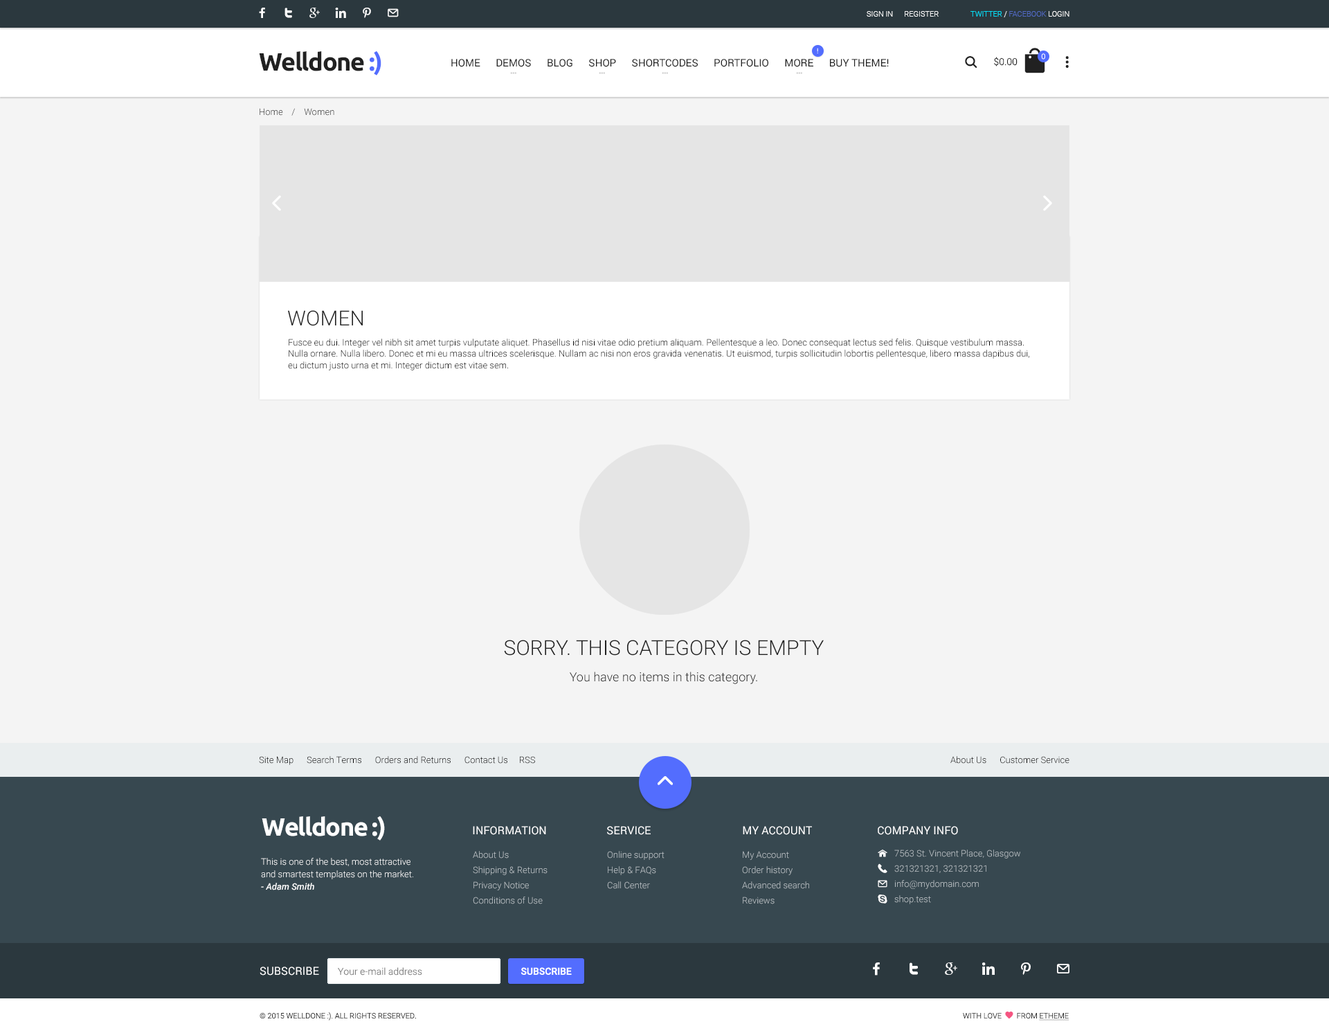
<style>
.page{position:relative;width:1329px;height:1033px;background:#f4f4f4}
.page>*{position:absolute;margin:0}
.t1{font:7.6px "Roboto-Light";color:#ffffff}
.t2{font:7.6px "Roboto-Light";color:#526ac4}
.t3{font:7.6px "Roboto-Light";color:#00e4ff}
.t4{font:24.9px "Ubuntu-Bold";letter-spacing:-0.04em;color:#212121}
.t5{font:24.9px "Ubuntu-Bold";letter-spacing:-0.04em;color:#536dfe}
.t6{font:6.9px "Roboto-Regular"}
.t7{font:10.4px "Roboto-Regular";color:#212121}
.t8{font:9.7px "Roboto-Light";color:#212121}
.t9{font:9px "Roboto-Light";color:#2b2b2b}
.t10{font:20.8px "Roboto-Light";color:#212121;text-transform:uppercase}
.t11{font:9px/11.4px "Roboto-Light";color:#000000}
.t12{font:12.5px/26.3px "Roboto-Light";color:#212121}
.t13{font:20.8px/26.3px "Roboto-Light";color:#212121;text-transform:uppercase}
.t14{font:9px "Roboto-Light";color:#000000}
.t15{font:24.9px "Ubuntu-Bold";letter-spacing:-0.04em;color:#ffffff}
.t16{font:11.1px "Roboto-Regular";color:#ffffff;text-transform:uppercase}
.t17{font:9px/12.5px "Roboto-Light";color:#ffffff}
.t18{font:9px/12.5px "Roboto-MediumItalic";color:#ffffff}
.t19{font:9px/15.2px "Roboto-Light";color:#bbc2c6}
.t20{font:9.7px "Roboto-Light";color:#848484}
.t21{font:9.7px "Roboto-Medium";color:#ffffff;text-transform:uppercase}
.t22{font:7.6px "Roboto-Light";color:#2b2b2b;text-transform:uppercase}
</style>
<div class="page">
<p class="t1" style="left:867px;top:11px;width:72px;height:6px">SIGN IN      REGISTER</p>
<p class="t2" style="left:971px;top:11px;width:99px;height:6px"><span class="t3">TWITTER </span><span class="t1">/ </span>FACEBOOK <span class="t1">LOGIN</span></p>
<p class="t4" style="left:259px;top:51px;width:122px;height:24px">Welldone <span class="t5">:)</span></p>
<p class="t6" style="left:817px;top:48px;width:1px;height:5px">!</p>
<p class="t1" style="left:1041px;top:53px;width:4px;height:7px">0</p>
<p class="t7" style="left:451px;top:59px;width:438px;height:8px">HOME      DEMOS      BLOG      SHOP      SHORTCODES      PORTFOLIO      MORE      BUY THEME!</p>
<p class="t8" style="left:994px;top:57px;width:24px;height:9px">$0.00</p>
<p class="t9" style="left:260px;top:108px;width:74px;height:8px">Home    /    Women</p>
<p class="t10" style="left:288px;top:310px;width:75px;height:16px">Women</p>
<p class="t11" style="left:288px;top:339px;width:741px;height:31px">Fusce eu dui. Integer vel nibh sit amet turpis vulputate aliquet. Phasellus id nisi vitae odio pretium aliquam. Pellentesque a leo. Donec consequat lectus sed felis. Quisque vestibulum massa. Nulla ornare. Nulla libero. Donec et mi eu massa ultrices scelerisque. Nullam ac nisi non eros gravida venenatis. Ut euismod, turpis sollicitudin lobortis pellentesque, libero massa dapibus dui, eu dictum justo urna et mi. Integer dictum est vitae sem.</p>
<p class="t12" style="left:504px;top:640px;width:320px;height:44px;text-align:center"><span class="t13">Sorry. This Category is Empty<br></span>You have no items in this category.</p>
<p class="t14" style="left:259px;top:756px;width:276px;height:9px">Site Map      Search Terms      Orders and Returns      Contact Us     RSS</p>
<p class="t14" style="left:951px;top:756px;width:119px;height:8px">About Us      Customer Service</p>
<p class="t15" style="left:262px;top:816px;width:123px;height:24px">Welldone :)</p>
<p class="t16" style="left:473px;top:826px;width:73px;height:9px">Information</p>
<p class="t16" style="left:607px;top:826px;width:44px;height:9px">service</p>
<p class="t16" style="left:743px;top:826px;width:69px;height:9px">My account</p>
<p class="t16" style="left:878px;top:826px;width:80px;height:9px">Company Info</p>
<p class="t17" style="left:261px;top:858px;width:152px;height:32px">This is one of the best, most attractive and smartest templates on the market. <br><span class="t18">- Adam Smith</span></p>
<p class="t19" style="left:473px;top:851px;width:75px;height:53px">About Us<br>Shipping &amp; Returns<br>Privacy Notice<br>Conditions of Use</p>
<p class="t19" style="left:607px;top:851px;width:58px;height:38px">Online support<br>Help &amp; FAQs<br>Call Center</p>
<p class="t19" style="left:742px;top:851px;width:67px;height:53px">My Account<br>Order history<br>Advanced search<br>Reviews</p>
<p class="t19" style="left:894px;top:849px;width:126px;height:55px">7563 St. Vincent Place, Glasgow<br>321321321, 321321321<br>info@mydomain.com<br>shop.test</p>
<p class="t16" style="left:260px;top:966px;width:59px;height:9px">Subscribe</p>
<p class="t20" style="left:338px;top:967px;width:84px;height:8px">Your e-mail address</p>
<p class="t21" style="left:521px;top:967px;width:51px;height:8px">SUBSCRIBE</p>
<p class="t22" style="left:260px;top:1012px;width:156px;height:8px">© 2015 Welldone :). All Rights Reserved.</p>
</div>
